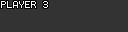
<style>
.page{position:relative;width:128px;height:32px;background:#333333}
.page>*{position:absolute;margin:0}
.t1{font:8px "Terminal";color:#fbfbfb}
</style>
<div class="page">
<p class="t1" style="left:1px;top:1px;width:47px;height:7px">PLAYER 3</p>
</div>
